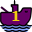
<style>
.page{position:relative;width:32px;height:32px;background:#ffffff}
.page>*{position:absolute;margin:0}
.t1{font:14px "Verdana-Bold";letter-spacing:0.14em;color:#f0ce11}
</style>
<div class="page">
<p class="t1" style="left:12px;top:11px;width:8px;height:10px">1</p>
</div>
